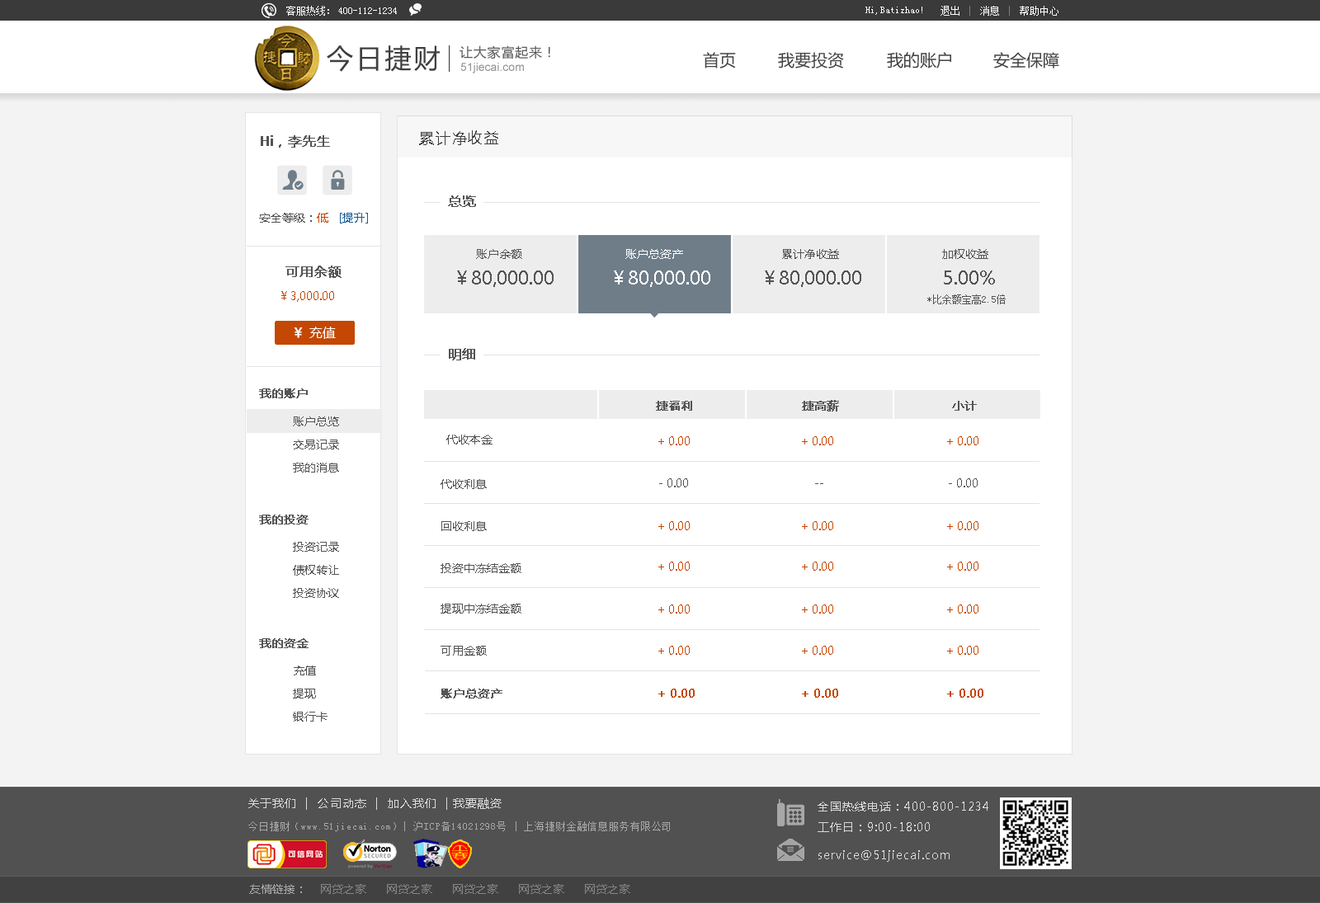
<style>
.page{position:relative;width:1320px;height:903px;background:#ffffff}
.page>*{position:absolute;margin:0}
.t1{font:9.9px "SimSun";color:#ffffff}
.t2{font:26.4px "MicrosoftYaHei";letter-spacing:0.1em;color:#3f3f3f}
.t3{font:13.2px "MicrosoftYaHei";letter-spacing:0.05em;color:#575757}
.t4{font:16.5px "MicrosoftYaHei";color:#414141}
.t5{font:11.5px "ArialMT";color:#969697}
.t6{font:13.2px "MicrosoftYaHei";color:#545454;font-weight:bold}
.t7{font:14.8px "MicrosoftYaHei";letter-spacing:0.1em;color:#3f3f3f}
.t8{font:11.5px "MicrosoftYaHei";color:#545454}
.t9{font:11.5px "MicrosoftYaHei";color:#c44704}
.t10{font:11.5px "MicrosoftYaHei";color:#175a94}
.t11{font:11.5px "MicrosoftYaHei";color:#ffffff}
.t12{font:18.1px "MicrosoftYaHei";color:#545454}
.t13{font:18.1px "MicrosoftYaHei";color:#ffffff}
.t14{font:11.5px "MicrosoftYaHei";color:#c44703}
.t15{font:9.9px "SimSun";color:#545454}
.t16{font:13.2px "MicrosoftYaHei";color:#ffffff}
.t17{font:13.2px "MicrosoftYaHei";color:#ffffff;font-weight:bold}
.t18{font:11.5px "MicrosoftYaHei";color:#545454;font-weight:bold}
.t19{font:11.5px/23.1px "MicrosoftYaHei";color:#545454}
.t20{font:11.5px "MicrosoftYaHei";color:#c44704;font-weight:bold}
.t21{font:11.5px "MicrosoftYaHei";letter-spacing:0.07em;color:#dbdbdb}
.t22{font:11.5px "MicrosoftYaHei";letter-spacing:0.07em;color:#dadada}
.t23{font:9.9px "SimSun";letter-spacing:0.07em;color:#a7a7a7}
.t24{font:11.5px "MicrosoftYaHei";color:#858484}
.t25{font:11.5px "MicrosoftYaHei";color:#a7a7a7}
</style>
<div class="page">
<p class="t1" style="left:286px;top:6px;width:43px;height:10px">客服热线：</p>
<p class="t1" style="left:940px;top:6px;width:118px;height:10px">退出    消息    帮助中心</p>
<p class="t1" style="left:338px;top:7px;width:59px;height:7px">400-112-1234</p>
<p class="t1" style="left:865px;top:7px;width:57px;height:8px">Hi,Batizhao!</p>
<p class="t2" style="left:327px;top:45px;width:113px;height:27px">今日捷财</p>
<p class="t3" style="left:460px;top:45px;width:90px;height:14px">让大家富起来！</p>
<p class="t4" style="left:703px;top:52px;width:33px;height:16px">首页</p>
<p class="t4" style="left:778px;top:52px;width:66px;height:16px">我要投资</p>
<p class="t4" style="left:887px;top:52px;width:64px;height:16px">我的账户</p>
<p class="t4" style="left:993px;top:52px;width:66px;height:16px">安全保障</p>
<p class="t5" style="left:460px;top:63px;width:64px;height:10px">51jiecai.com</p>
<p class="t6" style="left:261px;top:135px;width:69px;height:13px">Hi，李先生</p>
<p class="t7" style="left:419px;top:130px;width:79px;height:15px">累计净收益</p>
<p class="t6" style="left:448px;top:196px;width:28px;height:11px">总览</p>
<p class="t8" style="left:259px;top:213px;width:109px;height:11px">安全等级：<span class="t9">低   </span><span class="t10">[提升]</span></p>
<p class="t8" style="left:476px;top:249px;width:46px;height:10px">账户余额</p>
<p class="t11" style="left:625px;top:249px;width:58px;height:10px">账户总资产</p>
<p class="t8" style="left:782px;top:249px;width:57px;height:10px">累计净收益</p>
<p class="t8" style="left:942px;top:249px;width:46px;height:10px">加权收益</p>
<p class="t6" style="left:285px;top:266px;width:57px;height:12px">可用余额</p>
<p class="t12" style="left:457px;top:271px;width:97px;height:16px">￥80,000.00</p>
<p class="t13" style="left:614px;top:271px;width:96px;height:16px">￥80,000.00</p>
<p class="t12" style="left:765px;top:271px;width:96px;height:16px">￥80,000.00</p>
<p class="t12" style="left:944px;top:271px;width:51px;height:14px">5.00%</p>
<p class="t14" style="left:281px;top:291px;width:53px;height:11px">￥3,000.00</p>
<p class="t15" style="left:927px;top:295px;width:79px;height:9px">*比余额宝高2.5倍</p>
<p class="t16" style="left:294px;top:327px;width:42px;height:12px"><span class="t17">￥ </span>充值</p>
<p class="t6" style="left:449px;top:348px;width:26px;height:13px">明细</p>
<p class="t18" style="left:259px;top:389px;width:49px;height:9px">我的账户</p>
<p class="t18" style="left:656px;top:401px;width:36px;height:10px">捷福利</p>
<p class="t18" style="left:802px;top:400px;width:37px;height:12px">捷高薪</p>
<p class="t18" style="left:952px;top:401px;width:25px;height:10px">小计</p>
<p class="t19" style="left:293px;top:417px;width:46px;height:56px">账户总览<br>交易记录<br>我的消息</p>
<p class="t8" style="left:446px;top:435px;width:47px;height:10px">代收本金</p>
<p class="t9" style="left:658px;top:436px;width:32px;height:9px">+ 0.00</p>
<p class="t9" style="left:802px;top:436px;width:31px;height:9px">+ 0.00</p>
<p class="t9" style="left:947px;top:436px;width:31px;height:9px">+ 0.00</p>
<p class="t8" style="left:441px;top:479px;width:46px;height:10px">代收利息</p>
<p class="t8" style="left:659px;top:478px;width:29px;height:10px">- 0.00</p>
<p class="t8" style="left:815px;top:483px;width:8px;height:1px">--</p>
<p class="t8" style="left:949px;top:478px;width:29px;height:10px">- 0.00</p>
<p class="t18" style="left:259px;top:515px;width:50px;height:10px">我的投资</p>
<p class="t8" style="left:441px;top:521px;width:46px;height:10px">回收利息</p>
<p class="t9" style="left:658px;top:521px;width:32px;height:9px">+ 0.00</p>
<p class="t9" style="left:802px;top:521px;width:31px;height:9px">+ 0.00</p>
<p class="t9" style="left:947px;top:521px;width:31px;height:9px">+ 0.00</p>
<p class="t19" style="left:293px;top:542px;width:46px;height:56px">投资记录<br>债权转让<br>投资协议</p>
<p class="t8" style="left:441px;top:563px;width:80px;height:10px">投资中冻结金额</p>
<p class="t9" style="left:658px;top:562px;width:32px;height:9px">+ 0.00</p>
<p class="t9" style="left:802px;top:562px;width:31px;height:9px">+ 0.00</p>
<p class="t9" style="left:947px;top:562px;width:31px;height:9px">+ 0.00</p>
<p class="t8" style="left:441px;top:604px;width:80px;height:10px">提现中冻结金额</p>
<p class="t9" style="left:658px;top:605px;width:32px;height:9px">+ 0.00</p>
<p class="t9" style="left:802px;top:605px;width:31px;height:9px">+ 0.00</p>
<p class="t9" style="left:947px;top:605px;width:31px;height:9px">+ 0.00</p>
<p class="t18" style="left:259px;top:639px;width:50px;height:9px">我的资金</p>
<p class="t8" style="left:441px;top:646px;width:46px;height:10px">可用金额</p>
<p class="t9" style="left:658px;top:646px;width:32px;height:9px">+ 0.00</p>
<p class="t9" style="left:802px;top:646px;width:31px;height:9px">+ 0.00</p>
<p class="t9" style="left:947px;top:646px;width:31px;height:9px">+ 0.00</p>
<p class="t19" style="left:293px;top:666px;width:35px;height:56px">充值<br>提现<br>银行卡</p>
<p class="t18" style="left:441px;top:689px;width:61px;height:10px">账户总资产</p>
<p class="t20" style="left:658px;top:689px;width:37px;height:9px">+ 0.00</p>
<p class="t20" style="left:802px;top:689px;width:36px;height:9px">+ 0.00</p>
<p class="t20" style="left:947px;top:689px;width:36px;height:9px">+ 0.00</p>
<p class="t21" style="left:248px;top:798px;width:254px;height:12px">关于我们  |  公司动态  |  加入我们  | 我要融资</p>
<p class="t22" style="left:818px;top:802px;width:170px;height:30px">全国热线电话：400-800-1234<br>工作日：9:00-18:00</p>
<p class="t23" style="left:248px;top:822px;width:422px;height:10px">今日捷财（www.51jiecai.com）| 沪ICP备14021298号 | 上海捷财金融信息服务有限公司</p>
<p class="t22" style="left:818px;top:851px;width:132px;height:11px">service@51jiecai.com</p>
<p class="t24" style="left:249px;top:884px;width:381px;height:10px"><span class="t25">友情链接：</span>    网贷之家      网贷之家      网贷之家      网贷之家      网贷之家</p>
</div>
